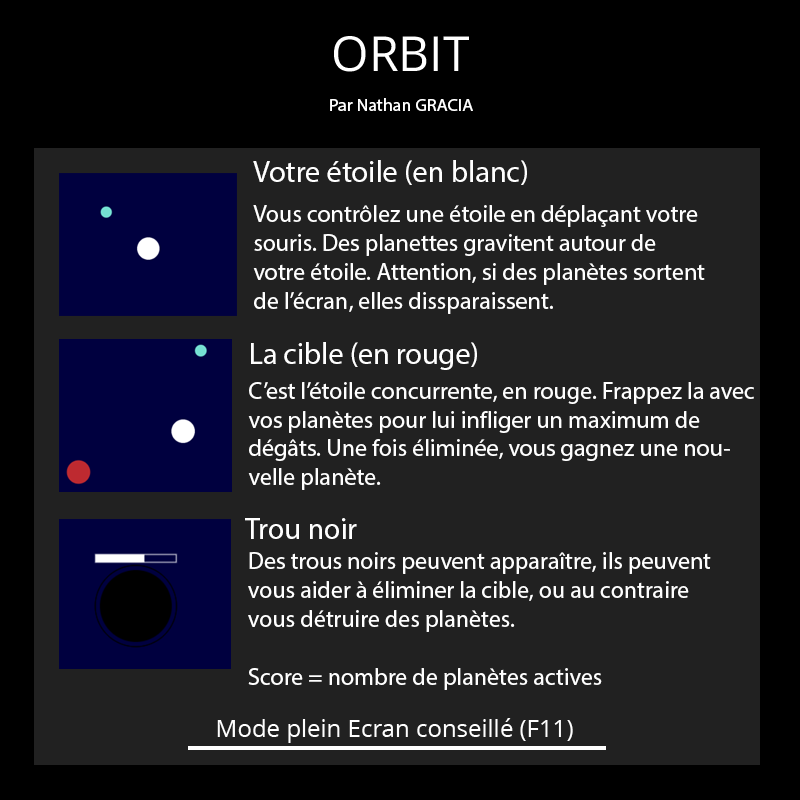
<style>
.page{position:relative;width:800px;height:800px;background:#212121}
.page>*{position:absolute;margin:0}
.t1{font:48.2px "OpenSans";color:#ffffff}
.t2{font:17.7px "MyriadPro-Regular";color:#ffffff}
.t3{font:30.1px "MyriadPro-Regular";color:#ffffff}
.t4{font:24px "MyriadPro-Regular";color:#ffffff}
.t5{font:30px "MyriadPro-Regular";color:#ffffff}
.t6{font:24px "OpenSans";color:#ffffff}
</style>
<div class="page">
<p class="t1" style="left:334px;top:36px;width:135px;height:36px">ORBIT</p>
<p class="t2" style="left:330px;top:98px;width:143px;height:13px">Par Nathan GRACIA</p>
<p class="t3" style="left:253px;top:160px;width:274px;height:25px">Votre étoile (en blanc)</p>
<p class="t4" style="left:253px;top:205px;width:452px;height:109px">Vous contrôlez une étoile en déplaçant votre souris. Des planettes gravitent autour de votre étoile. Attention, si des planètes sortent de l’écran, elles dissparaissent.</p>
<p class="t5" style="left:251px;top:342px;width:226px;height:28px">La cible (en rouge)</p>
<p class="t4" style="left:248px;top:382px;width:506px;height:108px">C’est l’étoile concurrente, en rouge. Frappez la avec vos planètes pour lui infliger un maximum de dégâts. Une fois éliminée, vous gagnez une nouvelle planète.</p>
<p class="t3" style="left:245px;top:518px;width:112px;height:21px">Trou noir</p>
<p class="t4" style="left:248px;top:552px;width:463px;height:138px">Des trous noirs peuvent apparaître, ils peuvent vous aider à éliminer la cible, ou au contraire vous détruire des planètes.<br><br>Score = nombre de planètes actives</p>
<p class="t6" style="left:217px;top:718px;width:356px;height:25px">Mode plein Ecran conseillé (F11)</p>
</div>
